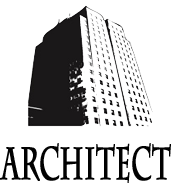
<style>
.page{position:relative;width:171px;height:191px;background:#ffffff}
.page>*{position:absolute;margin:0}
.t1{font:45.5px "CharlemagneStd-Bold";color:#010101;font-weight:bold;scale:0.54 1}
</style>
<div class="page">
<p class="t1" style="left:0px;top:143px;width:171px;height:40px">ARCHITECT</p>
</div>
